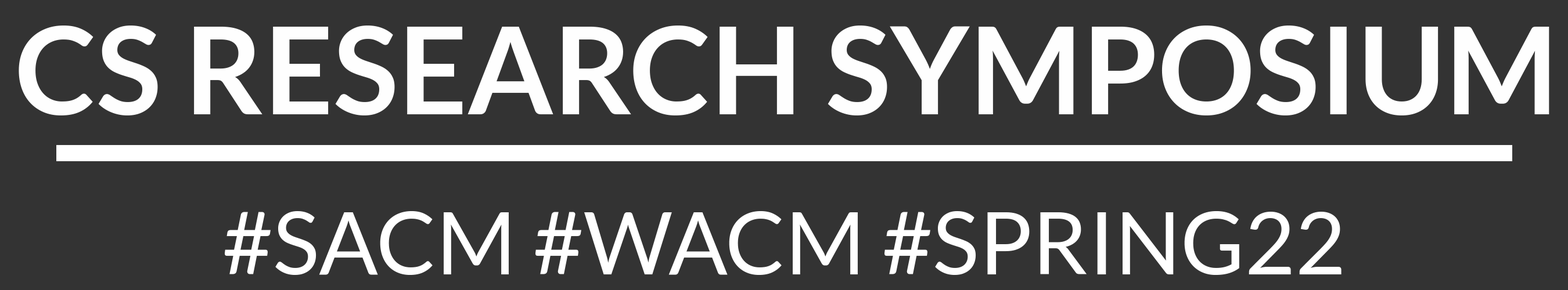
<style>
.page{position:relative;width:1568px;height:290px;background:#333333}
.page>*{position:absolute;margin:0}
.t1{font:121px "Lato-Bold";color:#fefefe}
.t2{font:87.1px "Lato-Regular";color:#ffffff}
</style>
<div class="page">
<p class="t1" style="left:19px;top:26px;width:1530px;height:90px">CS RESEARCH SYMPOSIUM</p>
<p class="t2" style="left:225px;top:211px;width:1117px;height:64px">#SACM #WACM #SPRING22</p>
</div>
